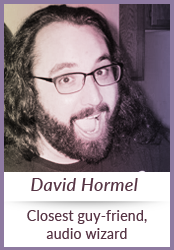
<style>
.page{position:relative;width:174px;height:250px}
.page>*{position:absolute;margin:0}
.t1{font:18px "Lato-MediumItalic";letter-spacing:0.018em;color:#563444}
.t2{font:14px/18px "Lato-Regular";letter-spacing:0.018em;color:#563444}
</style>
<div class="page">
<p class="t1" style="left:31px;top:178px;width:107px;height:13px">David Hormel</p>
<p class="t2" style="left:27px;top:210px;width:120px;height:29px;text-align:center">Closest guy-friend,<br>audio wizard</p>
</div>
